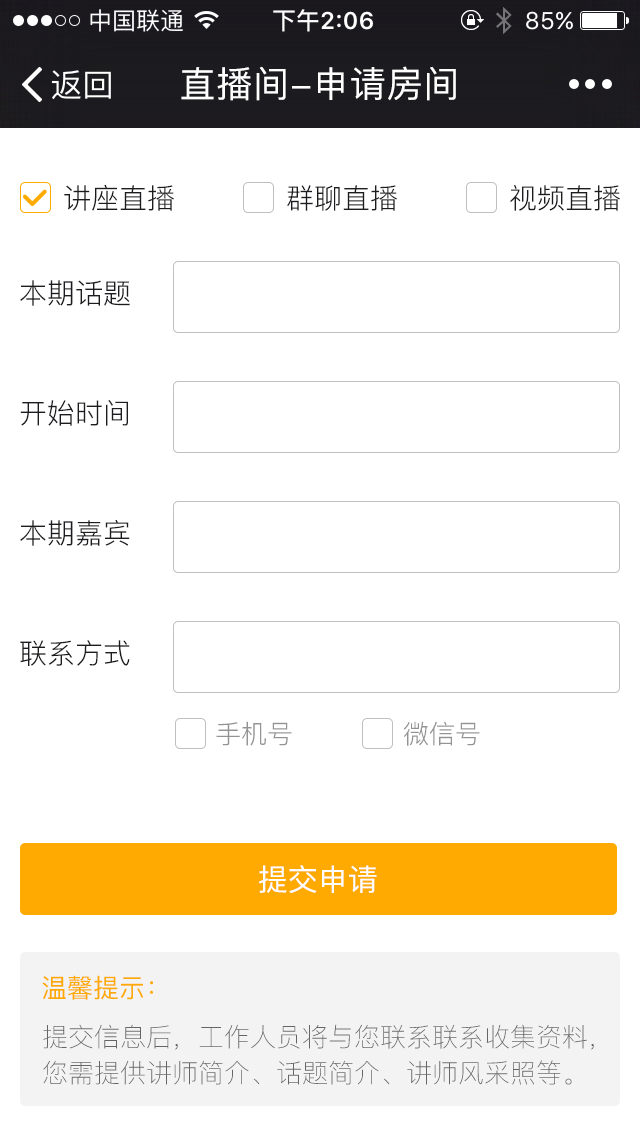
<style>
.page{position:relative;width:640px;height:1136px;background:#ffffff}
.page>*{position:absolute;margin:0}
.t1{font:36px "PingFang-SC-Medium";letter-spacing:0.025em;color:#ffffff}
.t2{font:28px "PingFang-SC-Regular";color:#1c1b1f}
.t3{font:26px "PingFang-SC-Regular";color:#939393}
.t4{font:30px "PingFang-SC-Medium";color:#ffffff}
.t5{font:26px "PingFang-SC-Medium";color:#ffaa00}
.t6{font:26px/36px "PingFang-SC-Light";color:#656565}
</style>
<div class="page">
<p class="t1" style="left:181px;top:66px;width:275px;height:35px">直播间-申请房间</p>
<p class="t2" style="left:64px;top:184px;width:110px;height:27px">讲座直播</p>
<p class="t2" style="left:287px;top:185px;width:110px;height:26px">群聊直播</p>
<p class="t2" style="left:510px;top:185px;width:110px;height:26px">视频直播</p>
<p class="t2" style="left:20px;top:280px;width:110px;height:26px">本期话题</p>
<p class="t2" style="left:20px;top:400px;width:108px;height:26px">开始时间</p>
<p class="t2" style="left:20px;top:520px;width:110px;height:26px">本期嘉宾</p>
<p class="t2" style="left:20px;top:640px;width:110px;height:26px">联系方式</p>
<p class="t3" style="left:216px;top:721px;width:76px;height:25px">手机号</p>
<p class="t3" style="left:404px;top:721px;width:76px;height:25px">微信号</p>
<p class="t4" style="left:259px;top:865px;width:118px;height:28px">提交申请</p>
<p class="t5" style="left:42px;top:975px;width:111px;height:25px">温馨提示：</p>
<p class="t6" style="left:43px;top:1024px;width:551px;height:61px">提交信息后，工作人员将与您联系联系收集资料，您需提供讲师简介、话题简介、讲师风采照等。</p>
</div>
